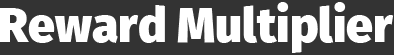
<style>
.page{position:relative;width:394px;height:55px;background:#333333}
.page>*{position:absolute;margin:0}
.t1{font:48px "FiraSans-Black";color:#ffffff}
</style>
<div class="page">
<p class="t1" style="left:0px;top:2px;width:394px;height:51px">Reward Multiplier</p>
</div>
